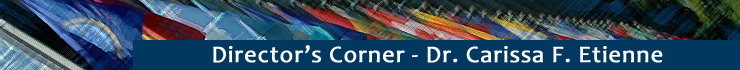
<style>
.page{position:relative;width:740px;height:70px;background:#01385f}
.page>*{position:absolute;margin:0}
.t1{font:24px "Candara";letter-spacing:0.025em;color:#ffffff;font-weight:bold}
</style>
<div class="page">
<p class="t1" style="left:213px;top:45px;width:450px;height:18px">Director’s Corner - Dr. Carissa F. Etienne</p>
</div>
